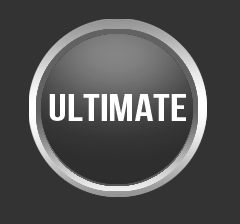
<style>
.page{position:relative;width:240px;height:224px;background:#333333}
.page>*{position:absolute;margin:0}
.t1{font:38.5px "BebasNeue";color:#ffffff;scale:1.22 1}
</style>
<div class="page">
<p class="t1" style="left:49px;top:94px;width:137px;height:27px">ULTIMATE</p>
</div>
